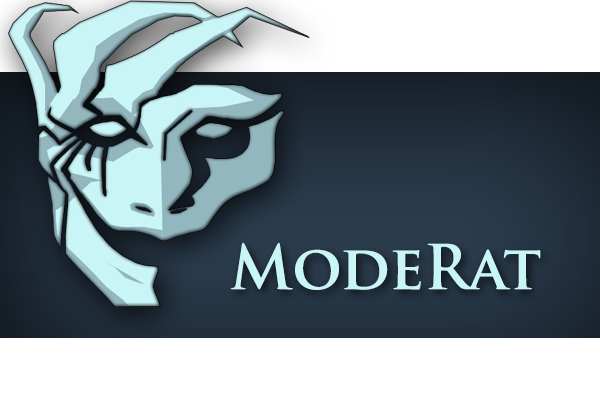
<style>
.page{position:relative;width:600px;height:400px;background:#ffffff}
.page>*{position:absolute;margin:0}
.t1{font:60px "TrajanPro-Bold";color:#c9f5f7}
</style>
<div class="page">
<p class="t1" style="left:230px;top:242px;width:311px;height:48px">ModeRat</p>
</div>
